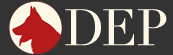
<style>
.page{position:relative;width:173px;height:55px;background:#333333}
.page>*{position:absolute;margin:0}
.t1{font:50px "Didot";letter-spacing:-0.02em;color:#fcf8e5}
</style>
<div class="page">
<p class="t1" style="left:65px;top:9px;width:102px;height:37px">DEP</p>
</div>
